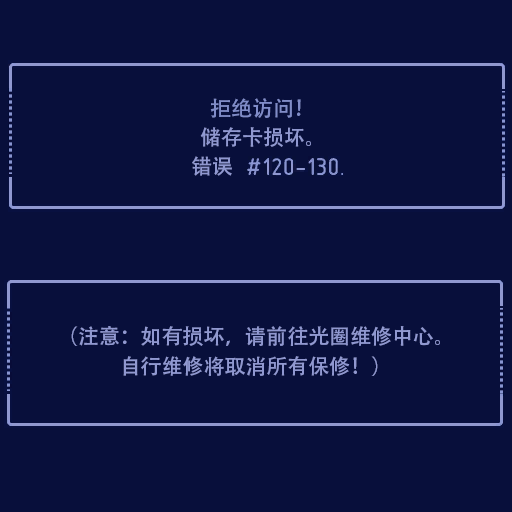
<style>
.page{position:relative;width:512px;height:512px;background:#080f3b}
.page>*{position:absolute;margin:0}
.t1{font:20.9px "AdobeHeitiStd-Regular";color:#808cc8}
.t2{font:20.9px "AdobeHeitiStd-Regular";color:#9098d0}
.t3{font:20.9px/30px "AdobeHeitiStd-Regular";color:#9098d0}
</style>
<div class="page">
<p class="t1" style="left:210px;top:98px;width:91px;height:20px">拒绝访问！</p>
<p class="t2" style="left:200px;top:127px;width:111px;height:20px">储存卡损坏。</p>
<p class="t2" style="left:192px;top:156px;width:40px;height:20px">错误</p>
<p class="t3" style="left:71px;top:326px;width:369px;height:50px;text-align:center">（注意：如有损坏，请前往光圈维修中心。<br>自行维修将取消所有保修！）</p>
</div>
